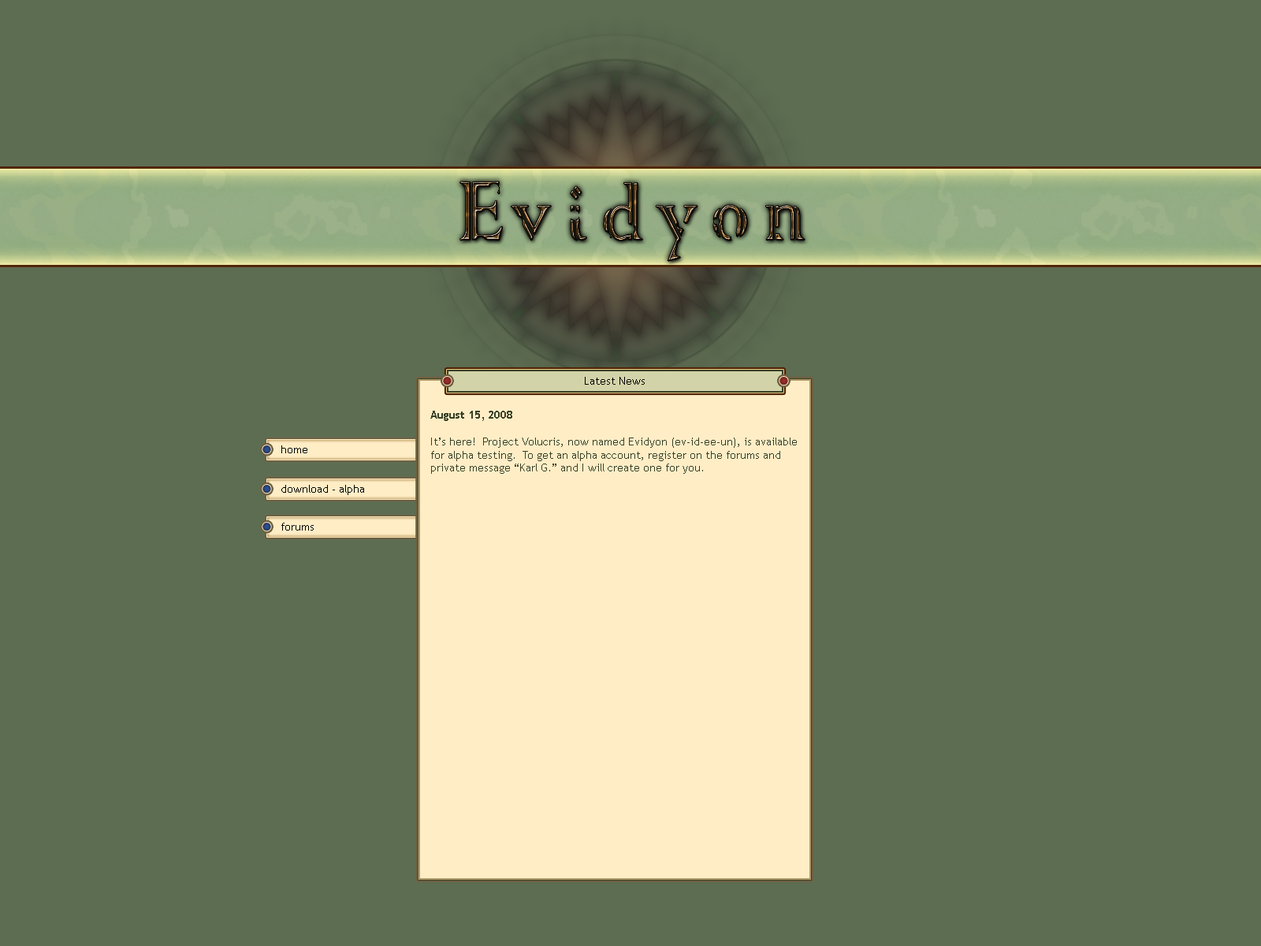
<style>
.page{position:relative;width:1261px;height:946px;background:#5d6d52}
.page>*{position:absolute;margin:0}
.t1{font:11px "TrebuchetMS";color:#000000}
.t2{font:11px "TrebuchetMS";color:#394026}
.t3{font:11px "TrebuchetMS-Bold";color:#394026}
</style>
<div class="page">
<p class="t1" style="left:585px;top:377px;width:60px;height:8px">Latest News</p>
<p class="t2" style="left:430px;top:411px;width:367px;height:63px"><span class="t3">August 15, 2008<br><br></span>It’s here!  Project Volucris, now named Evidyon (ev-id-ee-un), is available for alpha testing.  To get an alpha account, register on the forums and private message “Karl G.” and I will create one for you.</p>
<p class="t1" style="left:281px;top:445px;width:26px;height:8px">home</p>
<p class="t1" style="left:281px;top:485px;width:83px;height:10px">download - alpha</p>
<p class="t1" style="left:281px;top:485px;width:83px;height:10px">download - alpha</p>
<p class="t1" style="left:281px;top:522px;width:33px;height:8px">forums</p>
</div>
